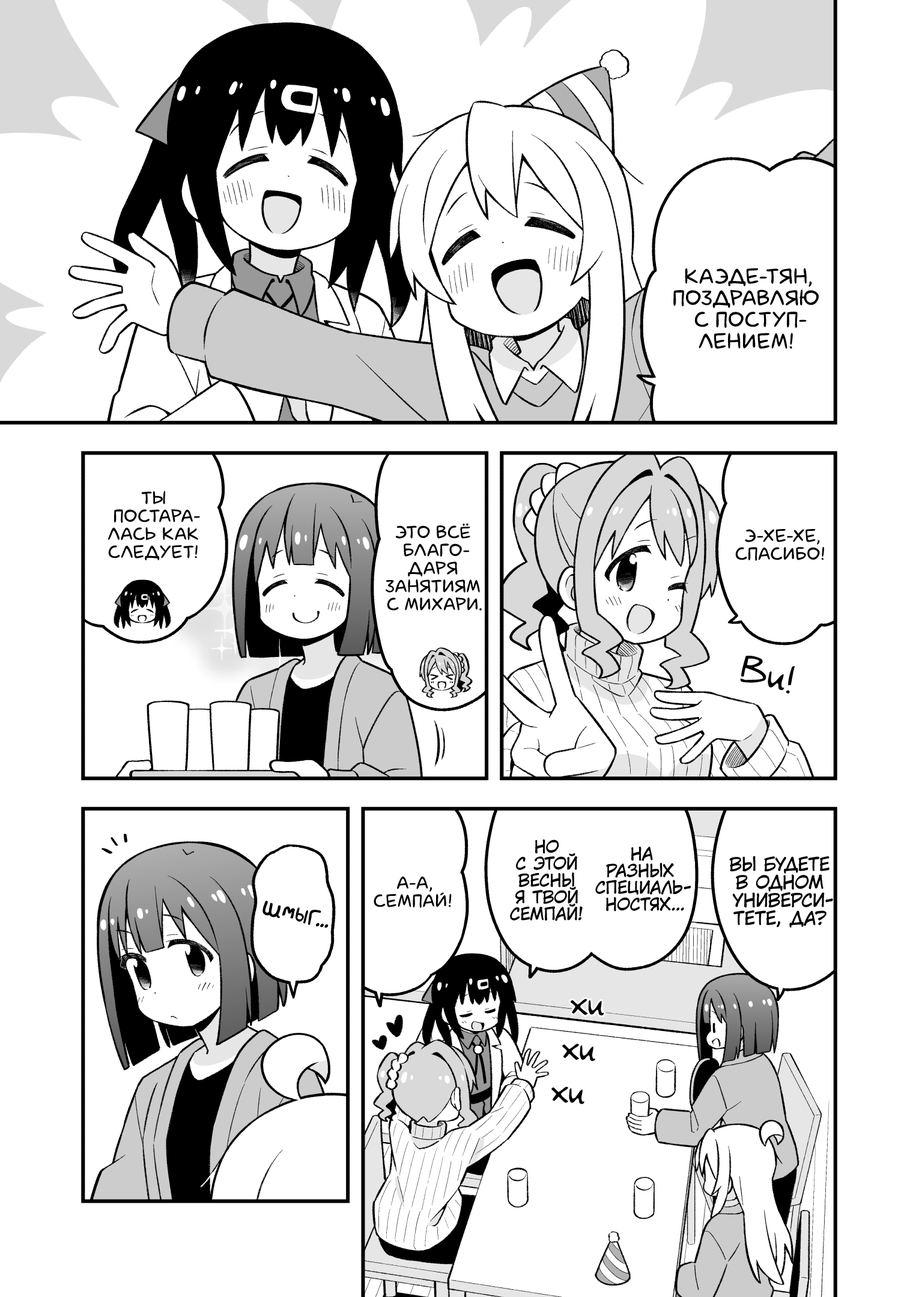
<style>
.page{position:relative;width:919px;height:1297px;background:#ffffff}
.page>*{position:absolute;margin:0}
.t1{font:21.6px "laCartoonerie";color:#000000;text-transform:uppercase}
.t2{font:18px "laCartoonerie";color:#000000;text-transform:uppercase}
.t3{font:36px "v_Augie";color:#000000}
.t4{font:16.8px "KuraiVoice2";color:#000000;text-transform:uppercase}
.t5{font:18px "KuraiVoice2";color:#000000;text-transform:uppercase}
.t6{font:19.8px "AkbarPlain";color:#000000}
.t7{font:32.4px "v_Augie";color:#000000}
</style>
<div class="page">
<p class="t1" style="left:673px;top:268px;width:146px;height:81px;text-align:center">Каэде-тян,<br>поздравляю<br>с поступ-<br>лением!</p>
<p class="t2" style="left:108px;top:491px;width:92px;height:69px;text-align:center">Ты<br>постара-<br>лась как<br>следует!</p>
<p class="t2" style="left:386px;top:523px;width:96px;height:88px;text-align:center">Это всё<br>благо-<br>даря<br>занятиям<br>с Михари.</p>
<p class="t2" style="left:735px;top:529px;width:89px;height:32px;text-align:center">Э-хе-хе,<br>спасибо!</p>
<p class="t3" style="left:740px;top:656px;width:55px;height:38px;rotate:14deg">Ви!</p>
<p class="t4" style="left:510px;top:840px;width:73px;height:81px;text-align:center">Но<br>с этой<br>весны<br>я твой<br>семпай!</p>
<p class="t4" style="left:595px;top:847px;width:96px;height:65px;text-align:center">На<br>разных<br>специаль-<br>ностях...</p>
<p class="t5" style="left:729px;top:856px;width:104px;height:72px;text-align:center">Вы будете<br>в одном<br>универси-<br>тете, да?</p>
<p class="t2" style="left:374px;top:876px;width:78px;height:32px;text-align:center">А-а,<br>семпай!</p>
<p class="t6" style="left:262px;top:901px;width:67px;height:27px;rotate:9deg">шмыг...</p>
<p class="t7" style="left:570px;top:999px;width:34px;height:17px;rotate:5deg">хи</p>
<p class="t7" style="left:562px;top:1044px;width:33px;height:17px;rotate:7deg">хи</p>
<p class="t7" style="left:551px;top:1087px;width:33px;height:18px;rotate:7deg">хи</p>
</div>
